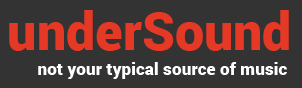
<style>
.page{position:relative;width:302px;height:88px;background:#333333}
.page>*{position:absolute;margin:0}
.t1{font:52px "Roboto-Black";color:#e53825}
.t2{font:17.3px "Roboto-Black";color:#ffffff}
</style>
<div class="page">
<p class="t1" style="left:9px;top:10px;width:280px;height:41px">underSound</p>
<p class="t2" style="left:38px;top:62px;width:249px;height:17px">not your typical source of music</p>
</div>
